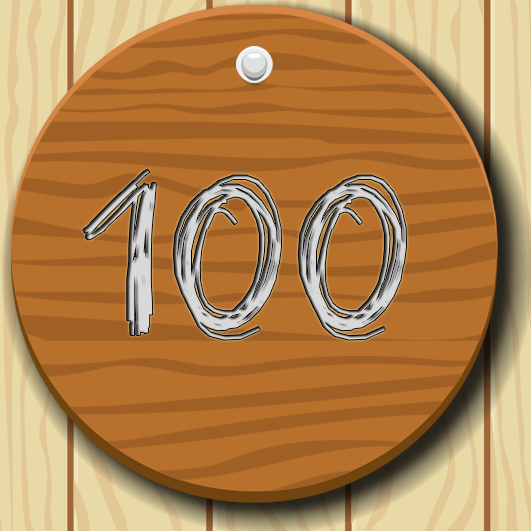
<style>
.page{position:relative;width:531px;height:531px;background:#b7712c}
.page>*{position:absolute;margin:0}
.t1{font:208.3px "PWChalk"}
</style>
<div class="page">
<p class="t1" style="left:83px;top:169px;width:323px;height:171px">100</p>
</div>
